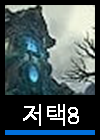
<style>
.page{position:relative;width:100px;height:140px;background:#000000}
.page>*{position:absolute;margin:0}
.t1{font:40px "NanumGothicCoding";color:#ffffff;font-weight:bold}
</style>
<div class="page">
<p class="t1" style="left:23px;top:104px;width:56px;height:22px">저택8</p>
</div>
